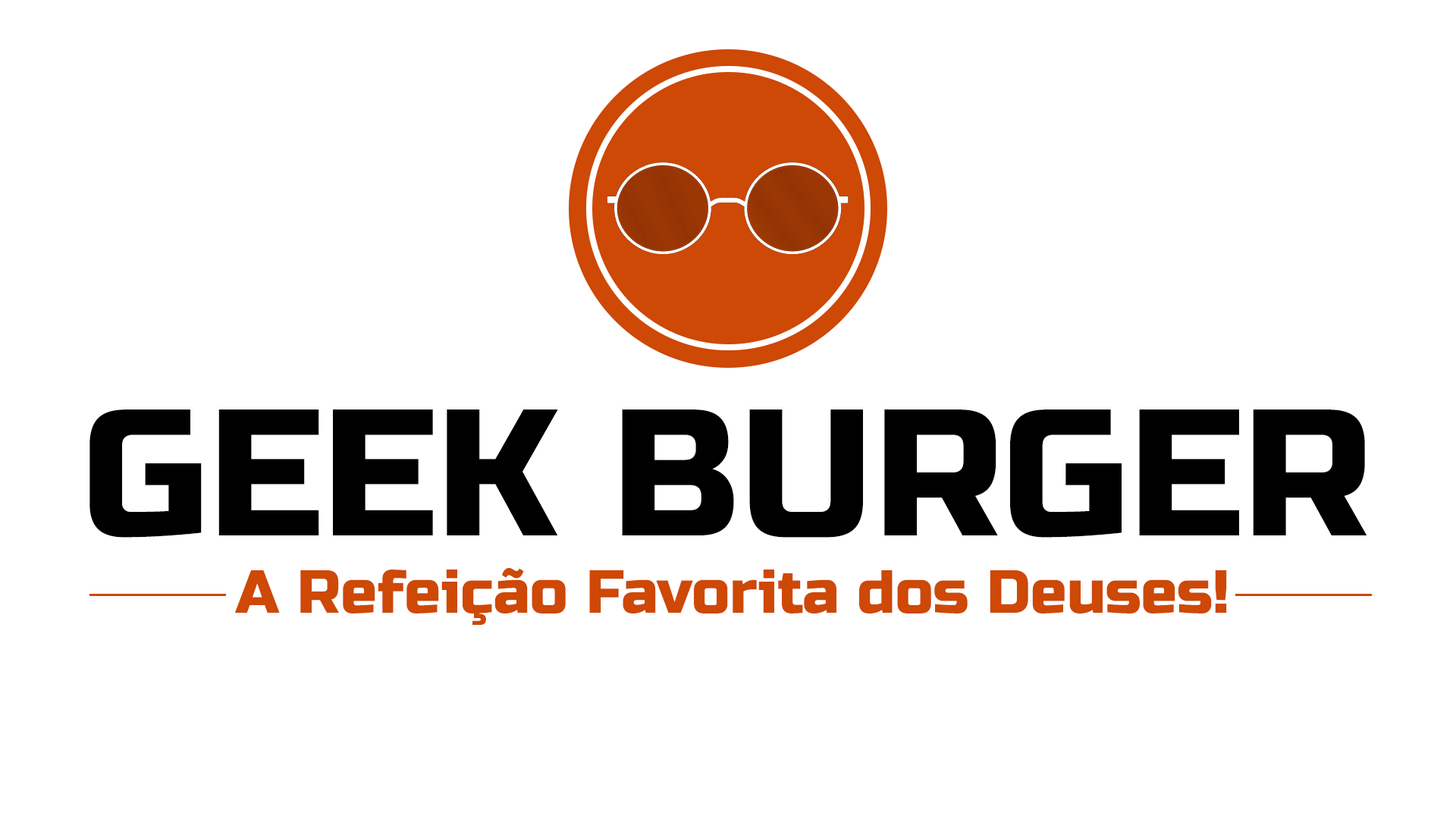
<style>
.page{position:relative;width:1456px;height:819px;background:#ffffff}
.page>*{position:absolute;margin:0}
.t1{font:179.6px "RussoOne-Regular";color:#000000}
.t2{font:60.7px "RussoOne-Regular";color:#ce4806}
</style>
<div class="page">
<p class="t1" style="left:89px;top:409px;width:1278px;height:129px">GEEK BURGER</p>
<p class="t2" style="left:235px;top:568px;width:992px;height:57px">A Refeição Favorita dos Deuses!</p>
</div>
